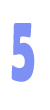
<style>
.page{position:relative;width:50px;height:110px;background:#ffffff}
.page>*{position:absolute;margin:0}
.t1{font:96px "BerlinSansFBDemi-Bold";color:#7f90f4;scale:0.5 1}
</style>
<div class="page">
<p class="t1" style="left:11px;top:23px;width:24px;height:59px">5</p>
</div>
